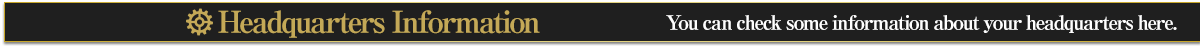
<style>
.page{position:relative;width:1200px;height:50px;background:#1f1f1f}
.page>*{position:absolute;margin:0}
.t1{font:30px "RyuminPro-ExBold";letter-spacing:-0.08em;color:#c4a957}
.t2{font:20px "RyuminPro-ExBold";letter-spacing:-0.08em;color:#ffffff}
</style>
<div class="page">
<p class="t1" style="left:218px;top:10px;width:322px;height:28px">Headquarters Information</p>
<p class="t2" style="left:666px;top:15px;width:511px;height:18px">You can check some information about your headquarters here.</p>
</div>
